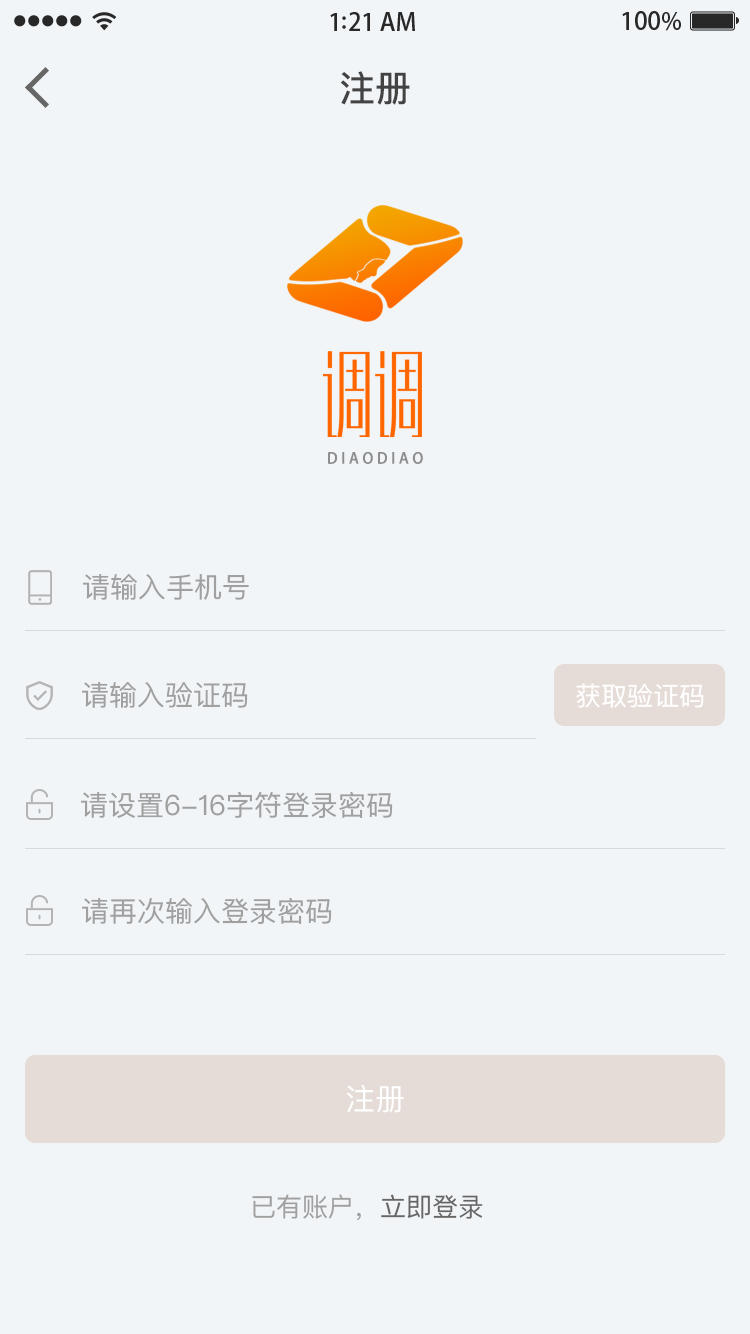
<style>
.page{position:relative;width:750px;height:1334px;background:#f2f5f7}
.page>*{position:absolute;margin:0}
.t1{font:36px "PingFangSC-Medium";color:#434343}
.t2{font:87.4px "MFXingHei_Noncommercial-Light";color:#fd7103;text-transform:uppercase}
.t3{font:15px "AdobeHeitiStd-Regular";letter-spacing:0.242em;color:#8d8d8d;text-transform:uppercase}
.t4{font:28px "PingFangSC-Regular";color:#a0a0a0}
.t5{font:26px "PingFangSC-Regular";color:#ffffff}
.t6{font:30px "PingFangSC-Regular";color:#ffffff;text-transform:uppercase}
.t7{font:26px "PingFangSC-Regular";color:#a0a0a0}
.t8{font:26px "PingFangSC-Regular";color:#666666}
</style>
<div class="page">
<p class="t1" style="left:340px;top:71px;width:70px;height:34px">注册</p>
<p class="t2" style="left:323px;top:351px;width:99px;height:86px">调调</p>
<p class="t3" style="left:328px;top:452px;width:95px;height:12px">diaodiao</p>
<p class="t4" style="left:83px;top:574px;width:166px;height:26px">请输入手机号</p>
<p class="t4" style="left:82px;top:682px;width:166px;height:26px">请输入验证码</p>
<p class="t5" style="left:576px;top:683px;width:128px;height:25px">获取验证码</p>
<p class="t4" style="left:81px;top:791px;width:312px;height:27px">请设置6-16字符登录密码</p>
<p class="t4" style="left:82px;top:898px;width:250px;height:26px">请再次输入登录密码</p>
<p class="t6" style="left:346px;top:1084px;width:58px;height:29px">注册</p>
<p class="t7" style="left:252px;top:1194px;width:231px;height:27px">已有账户，<span class="t8">立即登录</span></p>
</div>
